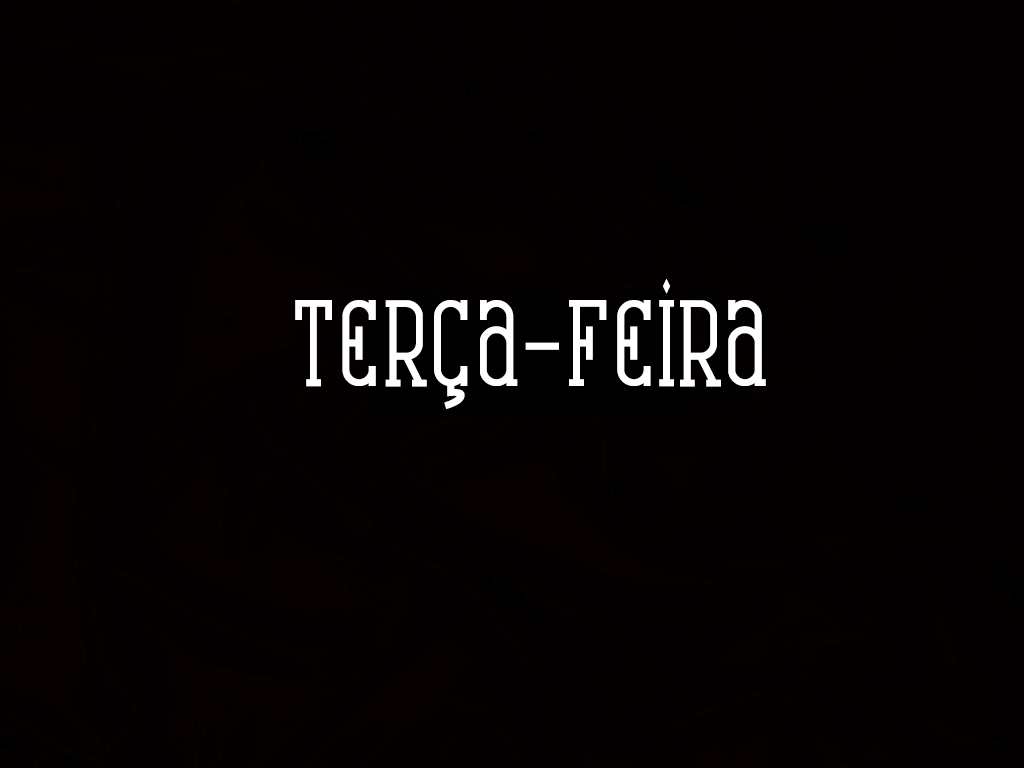
<style>
.page{position:relative;width:1024px;height:768px;background:#040000}
.page>*{position:absolute;margin:0}
.t1{font:132px "CatharsisRequiemBold";letter-spacing:-0.003em;color:#ffffff}
</style>
<div class="page">
<p class="t1" style="left:295px;top:279px;width:471px;height:130px">terça-feira</p>
</div>
